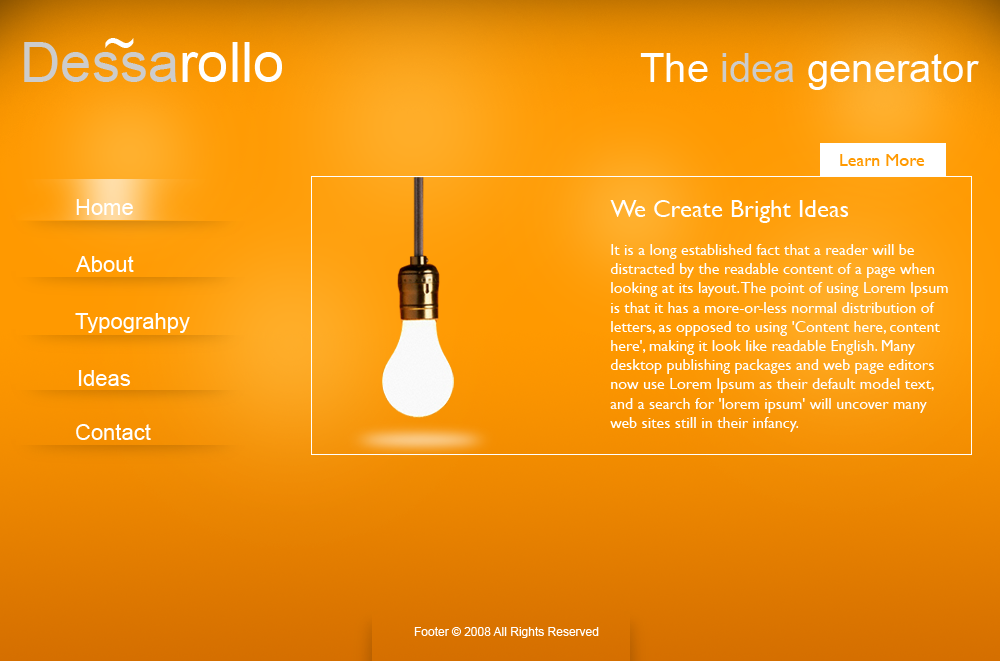
<style>
.page{position:relative;width:1000px;height:661px}
.page>*{position:absolute;margin:0}
.t1{font:56px "ArialMT";color:#ffffff}
.t2{font:56px "ArialMT";color:#cccccc}
.t3{font:40px "ArialMT";color:#ffffff}
.t4{font:40px "ArialMT";color:#cccccc}
.t5{font:18px "GillSans";color:#ff9900}
.t6{font:22px "ArialMT";color:#ffffff}
.t7{font:16px "GillSans";color:#ffffff}
.t8{font:25px "GillSans";color:#ffffff}
.t9{font:12px "ArialMT";color:#ffffff}
</style>
<div class="page">
<p class="t1" style="left:105px;top:38px;width:29px;height:10px">~</p>
<p class="t2" style="left:24px;top:42px;width:258px;height:40px">Dessa<span class="t1">rollo</span></p>
<p class="t3" style="left:640px;top:53px;width:339px;height:37px">The <span class="t4">idea </span>generator</p>
<p class="t5" style="left:840px;top:154px;width:85px;height:12px">Learn More</p>
<p class="t6" style="left:76px;top:199px;width:57px;height:16px">Home</p>
<p class="t7" style="left:610px;top:200px;width:338px;height:232px"><span class="t8">We Create Bright Ideas<br></span><br>It is a long established fact that a reader will be <br>distracted by the readable content of a page when looking at its layout. The point of using Lorem Ipsum is that it has a more-or-less normal distribution of letters, as opposed to using 'Content here, content here', making it look like readable English. Many <br>desktop publishing packages and web page editors now use Lorem Ipsum as their default model text, and a search for 'lorem ipsum' will uncover many web sites still in their infancy.</p>
<p class="t6" style="left:76px;top:256px;width:58px;height:16px">About</p>
<p class="t6" style="left:75px;top:313px;width:115px;height:20px">Typograhpy</p>
<p class="t6" style="left:78px;top:370px;width:53px;height:16px">Ideas</p>
<p class="t6" style="left:76px;top:424px;width:75px;height:16px">Contact</p>
<p class="t9" style="left:414px;top:627px;width:185px;height:11px">Footer © 2008 All Rights Reserved</p>
</div>
